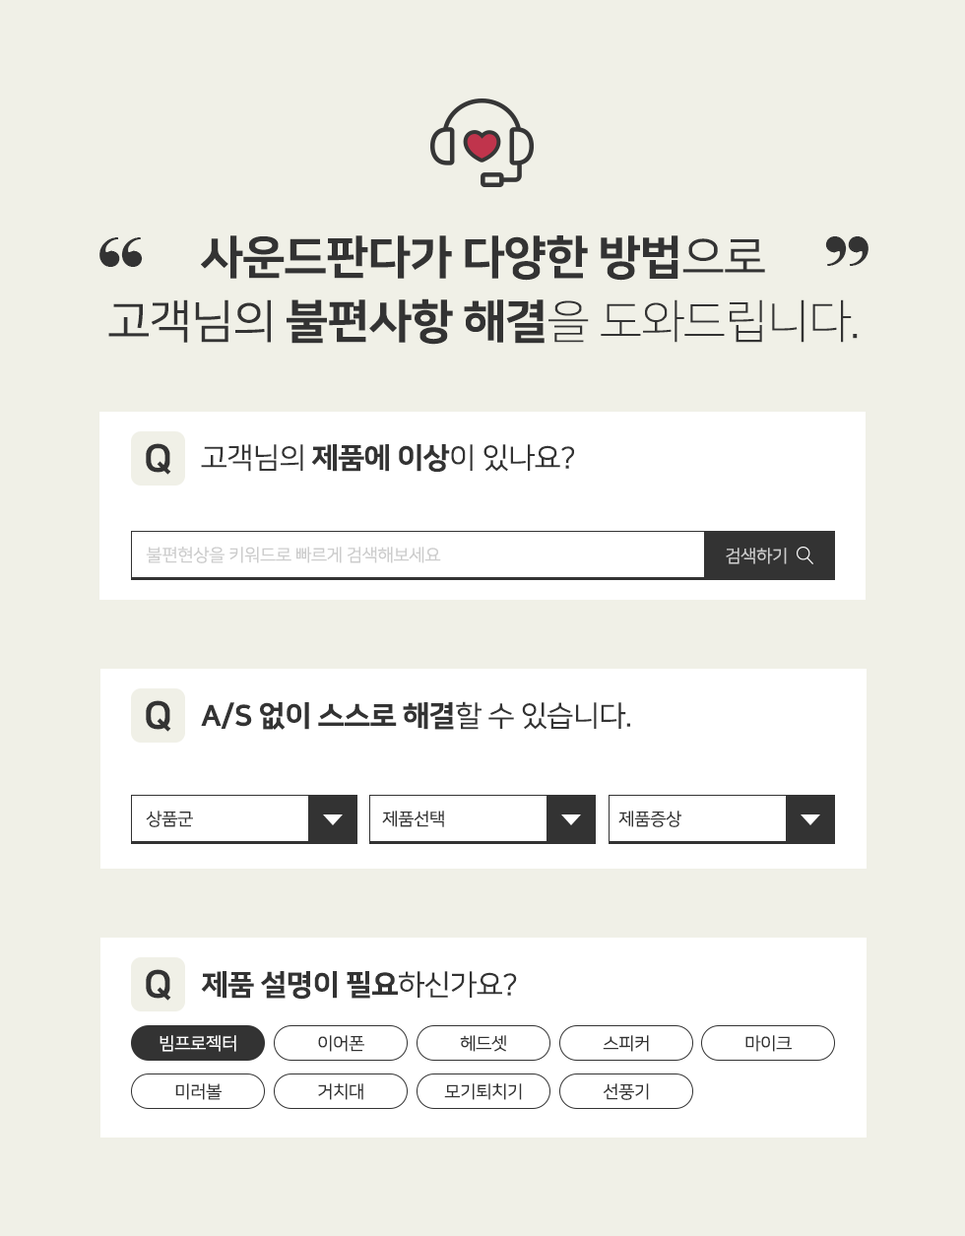
<style>
.page{position:relative;width:965px;height:1236px;background:#f0f0e7}
.page>*{position:absolute;margin:0}
.t1{font:95.5px "Elephant-Regular";letter-spacing:-0.075em;color:#333333;scale:1.03 1}
.t2{font:45.8px/64px "NanumSquareEB";letter-spacing:-0.025em;color:#333333;scale:1.03 1}
.t3{font:45.8px/64px "NanumSquareR";letter-spacing:-0.025em;color:#333333;scale:1.03 1}
.t4{font:45.8px/64px "NanumSquareL";letter-spacing:-0.025em;color:#333333;scale:1.03 1}
.t5{font:38.2px "NanumSquareEB";letter-spacing:-0.075em;color:#333333;scale:1.03 1}
.t6{font:28.7px "NanumSquareEB";letter-spacing:-0.025em;color:#333333;scale:1.03 1}
.t7{font:28.7px "NanumSquareR";letter-spacing:-0.025em;color:#333333;scale:1.03 1}
.t8{font:17.2px "NanumSquareR";letter-spacing:-0.025em;color:#cccccc;scale:1.03 1}
.t9{font:17.2px "NanumSquareR";letter-spacing:-0.025em;color:#333333;scale:1.03 1}
.t10{font:17.2px "NanumSquareR";letter-spacing:-0.025em;color:#ffffff;scale:1.03 1}
</style>
<div class="page">
<p class="t1" style="left:99px;top:237px;width:44px;height:30px">“</p>
<p class="t2" style="left:108px;top:235px;width:750px;height:110px;text-align:center">사운드판다가 다양한 방법<span class="t3">으로<br>고객님의 </span>불편사항 해결<span class="t4">을 도와드립니다.</span></p>
<p class="t1" style="left:825px;top:236px;width:43px;height:30px">”</p>
<p class="t5" style="left:146px;top:443px;width:25px;height:32px">Q</p>
<p class="t6" style="left:201px;top:444px;width:373px;height:29px"><span class="t7">고객님의 </span>제품에 이상<span class="t7">이 있나요?</span></p>
<p class="t8" style="left:146px;top:546px;width:295px;height:17px">불편현상을 키워드로 빠르게 검색해보세요</p>
<p class="t8" style="left:726px;top:547px;width:61px;height:17px">검색하기</p>
<p class="t5" style="left:146px;top:700px;width:25px;height:32px">Q</p>
<p class="t6" style="left:201px;top:701px;width:429px;height:29px">A/S 없이 스스로 해결<span class="t7">할 수 있습니다.</span></p>
<p class="t9" style="left:146px;top:810px;width:47px;height:17px">상품군</p>
<p class="t9" style="left:382px;top:810px;width:62px;height:17px">제품선택</p>
<p class="t9" style="left:618px;top:810px;width:63px;height:17px">제품증상</p>
<p class="t5" style="left:146px;top:969px;width:25px;height:31px">Q</p>
<p class="t6" style="left:201px;top:971px;width:316px;height:28px">제품 설명이 필요<span class="t7">하신가요?</span></p>
<p class="t10" style="left:160px;top:1035px;width:76px;height:17px">빔프로젝터</p>
<p class="t9" style="left:318px;top:1035px;width:46px;height:17px">이어폰</p>
<p class="t9" style="left:460px;top:1035px;width:46px;height:17px">헤드셋</p>
<p class="t9" style="left:603px;top:1035px;width:46px;height:17px">스피커</p>
<p class="t9" style="left:745px;top:1035px;width:47px;height:17px">마이크</p>
<p class="t9" style="left:175px;top:1083px;width:47px;height:17px">미러볼</p>
<p class="t9" style="left:318px;top:1083px;width:45px;height:17px">거치대</p>
<p class="t9" style="left:444px;top:1083px;width:78px;height:17px">모기퇴치기</p>
<p class="t9" style="left:603px;top:1083px;width:46px;height:17px">선풍기</p>
</div>
